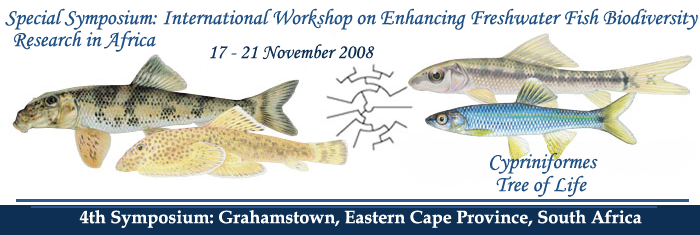
<style>
.page{position:relative;width:700px;height:235px;background:#ffffff}
.page>*{position:absolute;margin:0}
.t1{font:22px "MonotypeCorsiva";color:#205185}
.t2{font:20px "MonotypeCorsiva";color:#0d2f54}
.t3{font:18px "BookAntiqua-Bold";color:#ffffff}
</style>
<div class="page">
<p class="t1" style="left:5px;top:8px;width:693px;height:22px">Special Symposium: International Workshop on Enhancing Freshwater Fish Biodiversity</p>
<p class="t1" style="left:14px;top:30px;width:142px;height:22px">Research in Africa</p>
<p class="t2" style="left:210px;top:44px;width:165px;height:16px">17 - 21 November 2008</p>
<p class="t1" style="left:490px;top:152px;width:108px;height:22px">Cypriniformes</p>
<p class="t1" style="left:496px;top:175px;width:91px;height:22px">Tree of Life</p>
<p class="t3" style="left:79px;top:210px;width:563px;height:18px">4th Symposium: Grahamstown, Eastern Cape Province, South Africa</p>
</div>
